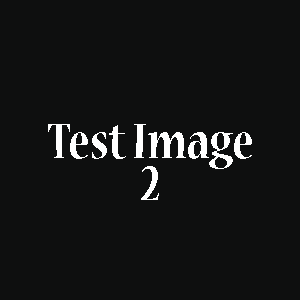
<style>
.page{position:relative;width:300px;height:300px;background:#0e0f0f}
.page>*{position:absolute;margin:0}
.t1{font:55.6px/41.7px "NuevaStd-BoldCond";color:#ffffff}
</style>
<div class="page">
<p class="t1" style="left:48px;top:124px;width:204px;height:76px;text-align:center">Test Image<br>2</p>
</div>
